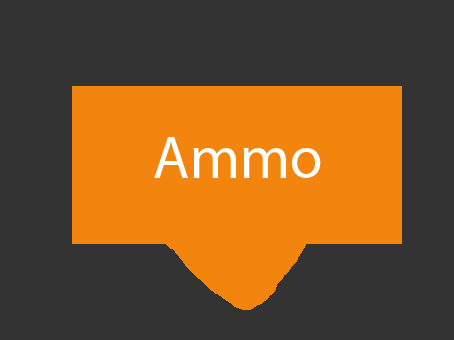
<style>
.page{position:relative;width:454px;height:340px;background:#333333}
.page>*{position:absolute;margin:0}
.t1{font:60px "MyriadPro-Regular";color:#ffffff}
</style>
<div class="page">
<p class="t1" style="left:154px;top:137px;width:167px;height:41px">Ammo</p>
</div>
